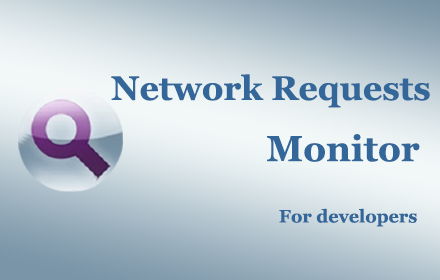
<style>
.page{position:relative;width:440px;height:280px}
.page>*{position:absolute;margin:0}
.t1{font:34px "Georgia-Bold";color:#336699}
.t2{font:36px "Georgia-Bold";color:#336699}
.t3{font:18px "Georgia-Bold";color:#336699}
</style>
<div class="page">
<p class="t1" style="left:111px;top:74px;width:319px;height:153px">Network Requests <br>                  <span class="t2">Monitor<br>                             </span><span class="t3">For developers</span></p>
</div>
